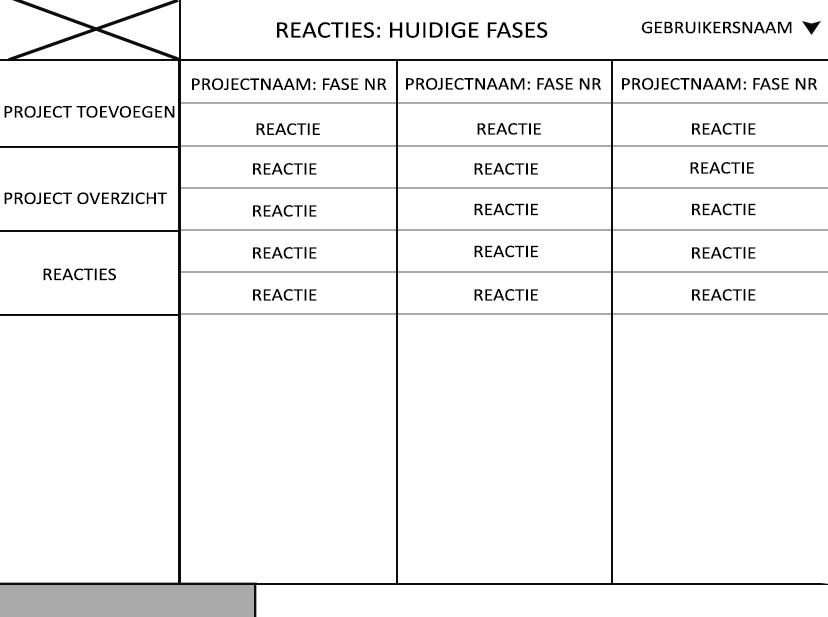
<style>
.page{position:relative;width:828px;height:617px;background:#ffffff}
.page>*{position:absolute;margin:0}
.t1{font:24px "Calibri";color:#000000;scale:1.09 1}
.t2{font:18px "Calibri";color:#000000;scale:1.09 1}
.t3{font:17.8px "Calibri";color:#000000;scale:1.1 1}
</style>
<div class="page">
<p class="t1" style="left:277px;top:22px;width:271px;height:16px">REACTIES: HUIDIGE FASES</p>
<p class="t2" style="left:641px;top:21px;width:151px;height:13px">GEBRUIKERSNAAM</p>
<p class="t2" style="left:192px;top:78px;width:195px;height:13px">PROJECTNAAM: FASE NR</p>
<p class="t2" style="left:406px;top:78px;width:195px;height:12px">PROJECTNAAM: FASE NR</p>
<p class="t2" style="left:622px;top:78px;width:195px;height:12px">PROJECTNAAM: FASE NR</p>
<p class="t2" style="left:4px;top:106px;width:171px;height:99px">PROJECT TOEVOEGEN<br><br><br><br>PROJECT OVERZICHT</p>
<p class="t2" style="left:256px;top:123px;width:64px;height:12px">REACTIE</p>
<p class="t3" style="left:477px;top:123px;width:64px;height:12px">REACTIE</p>
<p class="t3" style="left:692px;top:123px;width:64px;height:12px">REACTIE</p>
<p class="t3" style="left:253px;top:163px;width:64px;height:12px">REACTIE</p>
<p class="t3" style="left:474px;top:163px;width:64px;height:12px">REACTIE</p>
<p class="t3" style="left:690px;top:162px;width:64px;height:12px">REACTIE</p>
<p class="t3" style="left:253px;top:205px;width:64px;height:12px">REACTIE</p>
<p class="t3" style="left:474px;top:203px;width:64px;height:13px">REACTIE</p>
<p class="t3" style="left:692px;top:203px;width:64px;height:13px">REACTIE</p>
<p class="t3" style="left:474px;top:245px;width:64px;height:13px">REACTIE</p>
<p class="t3" style="left:253px;top:247px;width:64px;height:12px">REACTIE</p>
<p class="t3" style="left:692px;top:247px;width:64px;height:12px">REACTIE</p>
<p class="t2" style="left:43px;top:268px;width:73px;height:13px">REACTIES</p>
<p class="t3" style="left:253px;top:289px;width:64px;height:12px">REACTIE</p>
<p class="t3" style="left:474px;top:289px;width:64px;height:12px">REACTIE</p>
<p class="t3" style="left:692px;top:289px;width:64px;height:12px">REACTIE</p>
</div>
